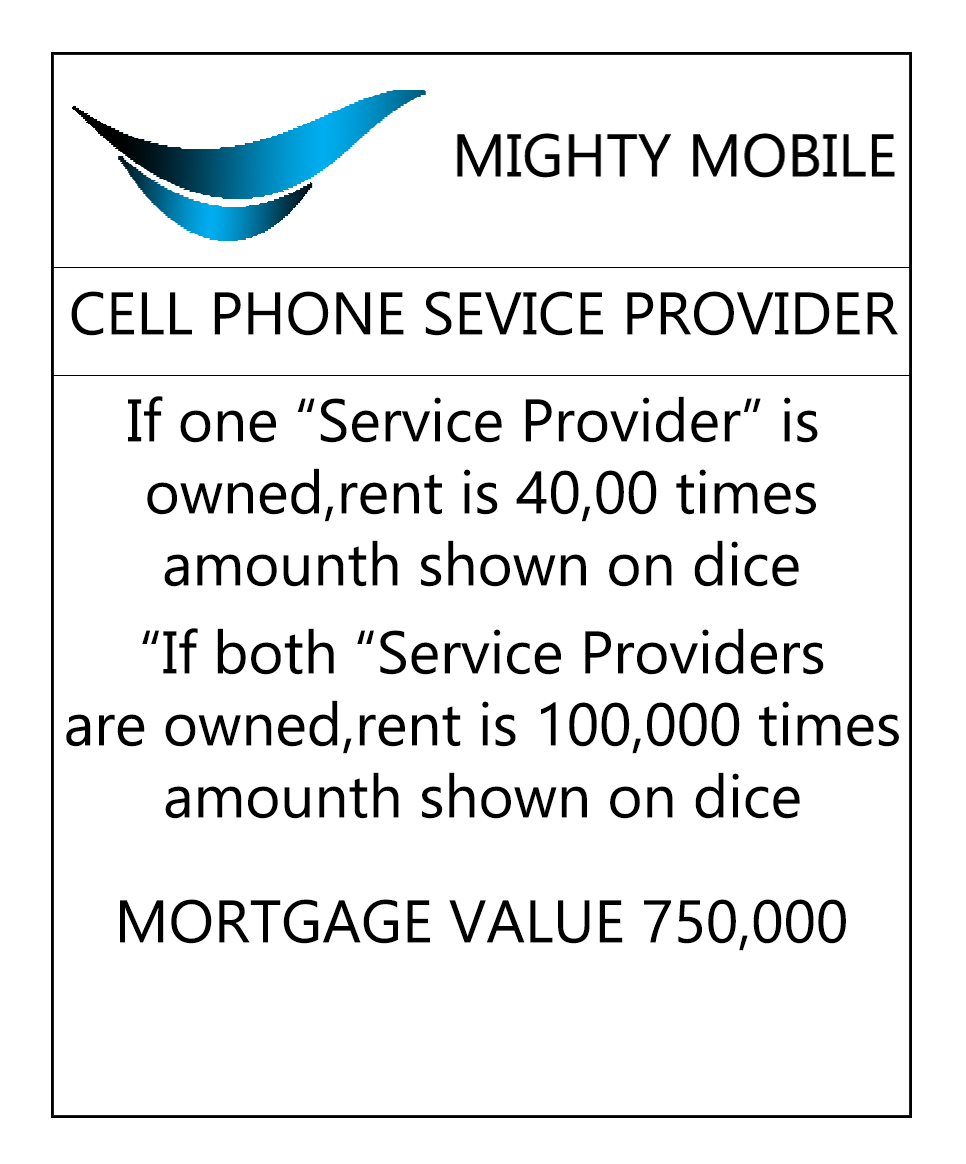
<style>
.page{position:relative;width:966px;height:1164px;background:#ffffff}
.page>*{position:absolute;margin:0}
.t1{font:60px "Ebrima";color:#000000}
</style>
<div class="page">
<p class="t1" style="left:71px;top:291px;width:827px;height:45px">CELL PHONE SEVICE PROVIDER</p>
<p class="t1" style="left:128px;top:396px;width:690px;height:191px;text-align:center">If one “Service Provider” is owned,rent is 40,00 times amounth shown on dice</p>
<p class="t1" style="left:66px;top:628px;width:833px;height:191px;text-align:center">If both “Service Providers”<br>are owned,rent is 100,000 times amounth shown on dice</p>
<p class="t1" style="left:120px;top:899px;width:726px;height:52px">MORTGAGE VALUE 750,000</p>
</div>
